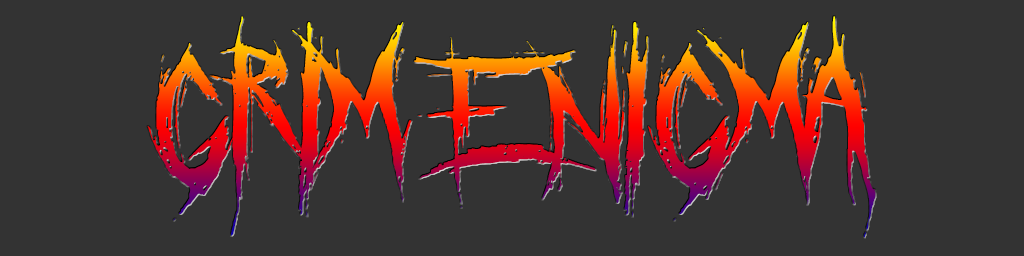
<style>
.page{position:relative;width:1024px;height:256px;background:#333333}
.page>*{position:absolute;margin:0}
.t1{font:180px "Crucifixion-Regular"}
</style>
<div class="page">
<p class="t1" style="left:147px;top:16px;width:729px;height:222px">Grim Enigma</p>
</div>
